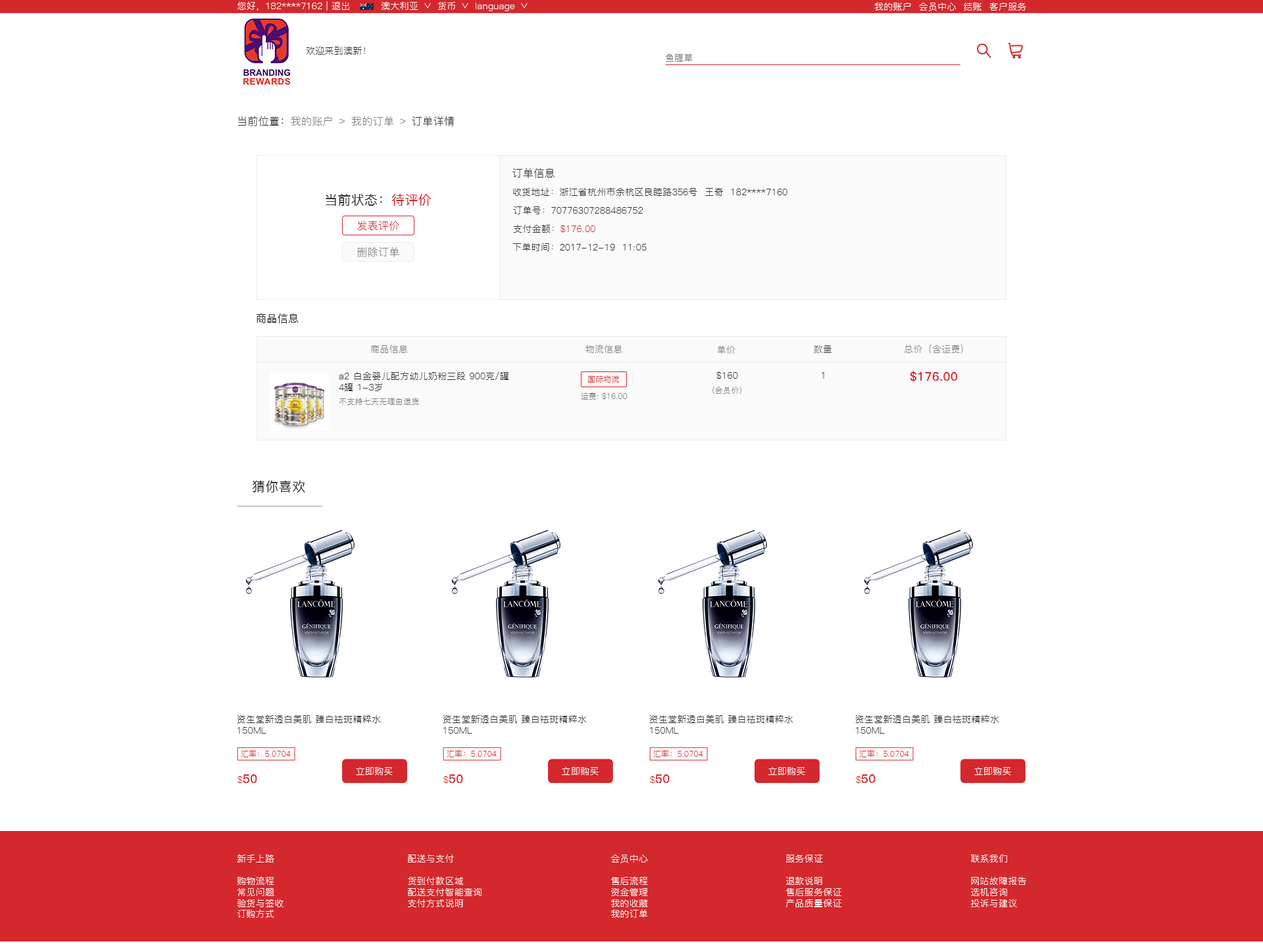
<style>
.page{position:relative;width:1263px;height:944px;background:#ffffff}
.page>*{position:absolute;margin:0}
.t1{font:9.2px "PingFang-SC-Regular";letter-spacing:0.02em;color:#ffffff}
.t2{font:9.2px "PingFang-SC-Regular";letter-spacing:0.02em;color:#333333}
.t3{font:9.2px "PingFang-SC-Regular";letter-spacing:0.02em;color:#767676}
.t4{font:10.5px "PingFang-SC-Regular";letter-spacing:0.02em;color:#808080}
.t5{font:10.5px "PingFang-SC-Regular";letter-spacing:0.02em;color:#333333}
.t6{font:13.2px "PingFang-SC-Medium";letter-spacing:0.02em;color:#333333}
.t7{font:13.2px "PingFang-SC-Medium";letter-spacing:0.02em;color:#d4282d}
.t8{font:9.2px "PingFang-SC-Regular";letter-spacing:0.02em;color:#343434}
.t9{font:10.5px "PingFang-SC-Regular";letter-spacing:0.02em;color:#d4282d}
.t10{font:9.2px "PingFang-SC-Regular";letter-spacing:0.02em;color:#d4282d}
.t11{font:10.5px "PingFang-SC-Medium";letter-spacing:0.02em;color:#333333}
.t12{font:9.2px "PingFang-SC-Regular";letter-spacing:0.02em;color:#808080}
.t13{font:7.9px "PingFang-SC-Regular";letter-spacing:0.02em;color:#d4282d}
.t14{font:11.8px "PingFang-SC-Bold";letter-spacing:0.02em;color:#d4282d}
.t15{font:7.9px "PingFang-SC-Regular";letter-spacing:0.02em;color:#808080}
.t16{font:9.2px "PingFang-SC-Regular";letter-spacing:0.02em;color:#fffefe}
</style>
<div class="page">
<p class="t1" style="left:237px;top:1px;width:112px;height:10px">您好，182****7162 | 退出</p>
<p class="t1" style="left:381px;top:1px;width:37px;height:9px">澳大利亚</p>
<p class="t1" style="left:437px;top:2px;width:18px;height:8px">货币</p>
<p class="t1" style="left:475px;top:3px;width:40px;height:8px">language</p>
<p class="t1" style="left:874px;top:2px;width:152px;height:9px">我的账户  会员中心  结账  客户服务</p>
<p class="t2" style="left:306px;top:46px;width:59px;height:9px">欢迎来到澳新！</p>
<p class="t3" style="left:665px;top:54px;width:27px;height:8px">鱼腥草</p>
<p class="t4" style="left:237px;top:116px;width:217px;height:10px"><span class="t5">当前位置：</span>我的账户 ﹥ 我的订单 ﹥<span class="t5"> 订单详情</span></p>
<p class="t5" style="left:512px;top:168px;width:42px;height:10px">订单信息</p>
<p class="t6" style="left:326px;top:193px;width:105px;height:13px">当前状态：<span class="t7">待评价</span></p>
<p class="t2" style="left:513px;top:187px;width:274px;height:9px">收货地址：浙江省杭州市余杭区良睦路356号  王奇  182****7160</p>
<p class="t8" style="left:513px;top:206px;width:130px;height:8px"><span class="t2">订单号：</span>70776307288486752</p>
<p class="t9" style="left:357px;top:221px;width:42px;height:10px">发表评价</p>
<p class="t10" style="left:513px;top:224px;width:82px;height:9px"><span class="t2">支付金额：</span>$176.00</p>
<p class="t2" style="left:512px;top:243px;width:134px;height:8px">下单时间：2017-12-19  11:05</p>
<p class="t4" style="left:357px;top:247px;width:42px;height:10px">删除订单</p>
<p class="t11" style="left:256px;top:314px;width:43px;height:10px">商品信息</p>
<p class="t12" style="left:370px;top:345px;width:38px;height:8px">商品信息</p>
<p class="t12" style="left:585px;top:345px;width:37px;height:8px">物流信息</p>
<p class="t12" style="left:717px;top:346px;width:18px;height:8px">单价</p>
<p class="t12" style="left:814px;top:345px;width:18px;height:8px">数量</p>
<p class="t12" style="left:904px;top:345px;width:59px;height:9px">总价（含运费）</p>
<p class="t2" style="left:339px;top:372px;width:169px;height:19px">a2 白金婴儿配方幼儿奶粉三段 900克/罐 <br>4罐 1-3岁</p>
<p class="t13" style="left:588px;top:376px;width:31px;height:7px">国际物流</p>
<p class="t2" style="left:716px;top:372px;width:22px;height:7px">$160</p>
<p class="t2" style="left:821px;top:372px;width:3px;height:7px">1</p>
<p class="t14" style="left:910px;top:371px;width:47px;height:11px">$176.00</p>
<p class="t15" style="left:712px;top:387px;width:29px;height:7px">(会员价)</p>
<p class="t15" style="left:339px;top:398px;width:80px;height:7px">不支持七天无理由退货</p>
<p class="t15" style="left:581px;top:393px;width:46px;height:7px">运费: $16.00</p>
<p class="t6" style="left:253px;top:480px;width:52px;height:13px">猜你喜欢</p>
<p class="t2" style="left:237px;top:715px;width:144px;height:19px">资生堂新透白美肌 臻白祛斑精粹水<br>150ML</p>
<p class="t2" style="left:443px;top:715px;width:144px;height:19px">资生堂新透白美肌 臻白祛斑精粹水<br>150ML</p>
<p class="t2" style="left:649px;top:715px;width:144px;height:19px">资生堂新透白美肌 臻白祛斑精粹水<br>150ML</p>
<p class="t2" style="left:855px;top:715px;width:144px;height:19px">资生堂新透白美肌 臻白祛斑精粹水<br>150ML</p>
<p class="t13" style="left:241px;top:750px;width:50px;height:8px">汇率：5.0704</p>
<p class="t13" style="left:447px;top:750px;width:50px;height:8px">汇率：5.0704</p>
<p class="t13" style="left:653px;top:750px;width:50px;height:8px">汇率：5.0704</p>
<p class="t13" style="left:859px;top:750px;width:50px;height:8px">汇率：5.0704</p>
<p class="t1" style="left:356px;top:767px;width:37px;height:8px">立即购买</p>
<p class="t1" style="left:562px;top:767px;width:36px;height:8px">立即购买</p>
<p class="t1" style="left:768px;top:767px;width:37px;height:8px">立即购买</p>
<p class="t1" style="left:974px;top:767px;width:37px;height:8px">立即购买</p>
<p class="t14" style="left:237px;top:775px;width:20px;height:9px"><span class="t10">$</span>50</p>
<p class="t14" style="left:443px;top:775px;width:20px;height:9px"><span class="t10">$</span>50</p>
<p class="t14" style="left:650px;top:775px;width:19px;height:9px"><span class="t10">$</span>50</p>
<p class="t14" style="left:856px;top:775px;width:19px;height:9px"><span class="t10">$</span>50</p>
<p class="t16" style="left:237px;top:854px;width:46px;height:64px">新手上路<br><br>购物流程<br>常见问题<br>验货与签收<br>订购方式</p>
<p class="t16" style="left:408px;top:854px;width:73px;height:54px">配送与支付<br><br>货到付款区域<br>配送支付智能查询<br>支付方式说明</p>
<p class="t16" style="left:610px;top:855px;width:38px;height:63px">会员中心<br><br>售后流程<br>资金管理<br>我的收藏<br>我的订单</p>
<p class="t16" style="left:786px;top:855px;width:56px;height:53px">服务保证<br><br>退款说明<br>售后服务保证<br>产品质量保证</p>
<p class="t16" style="left:970px;top:855px;width:56px;height:53px">联系我们<br><br>网站故障报告<br>选机咨询<br>投诉与建议</p>
</div>
